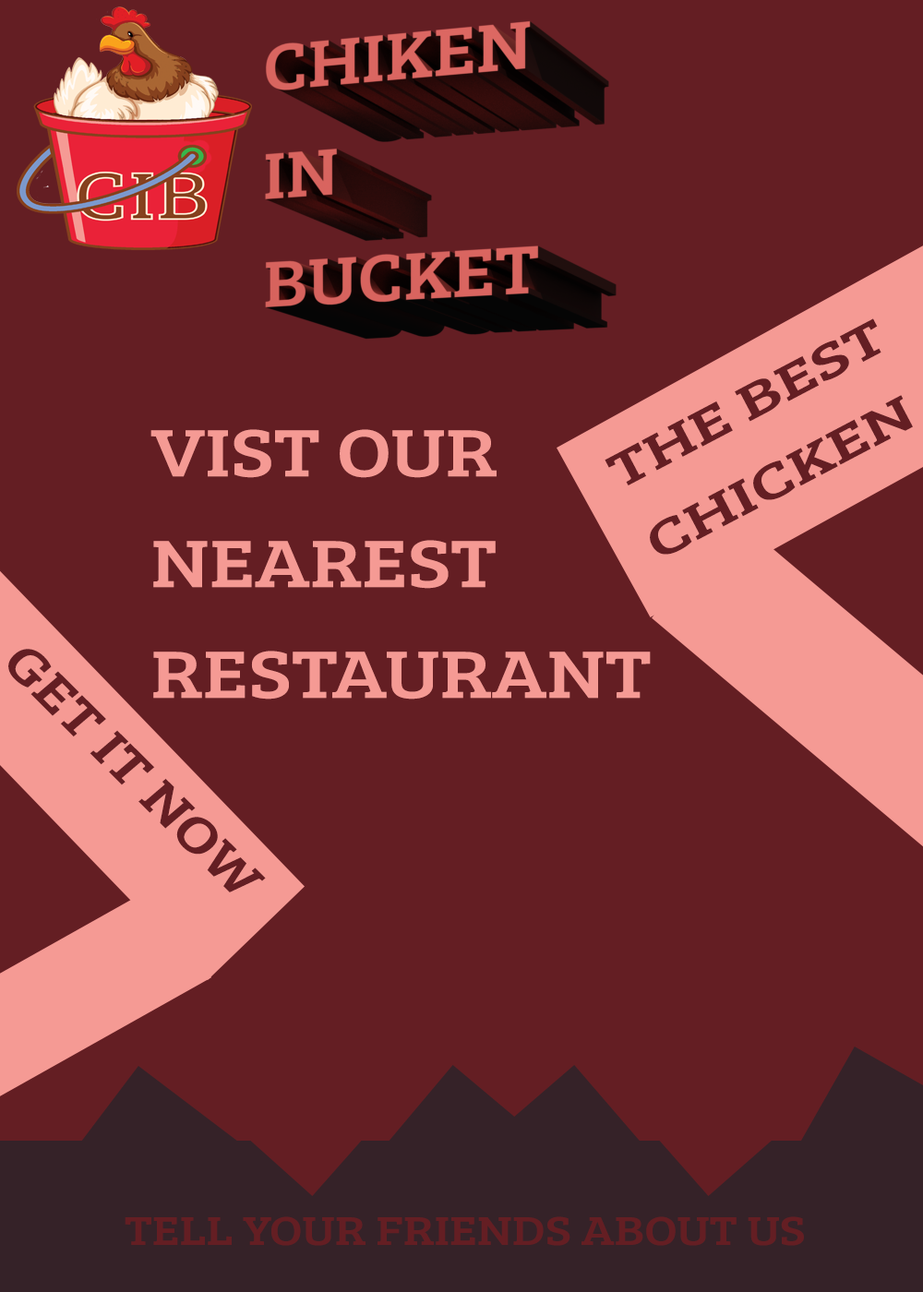
<style>
.page{position:relative;width:923px;height:1292px;background:#641e23}
.page>*{position:absolute;margin:0}
.t1{font:50.4px "BreeSerif-Regular";color:#641e23;scale:1.43 1}
.t2{font:69.2px "BreeSerif-Regular";color:#f59a94;scale:1.2 1}
.t3{font:41.5px "BreeSerif-Regular";color:#641e23;scale:1.2 1}
</style>
<div class="page">
<p class="t1" style="left:604px;top:318px;width:309px;height:237px;rotate:-28deg">THE BEST<br>CHICKEN</p>
<p class="t2" style="left:150px;top:429px;width:501px;height:271px">VIST OUR NEAREST RESTAURANT</p>
<p class="t3" style="left:125px;top:1216px;width:679px;height:30px">TELL YOUR FRIENDS ABOUT US</p>
</div>
